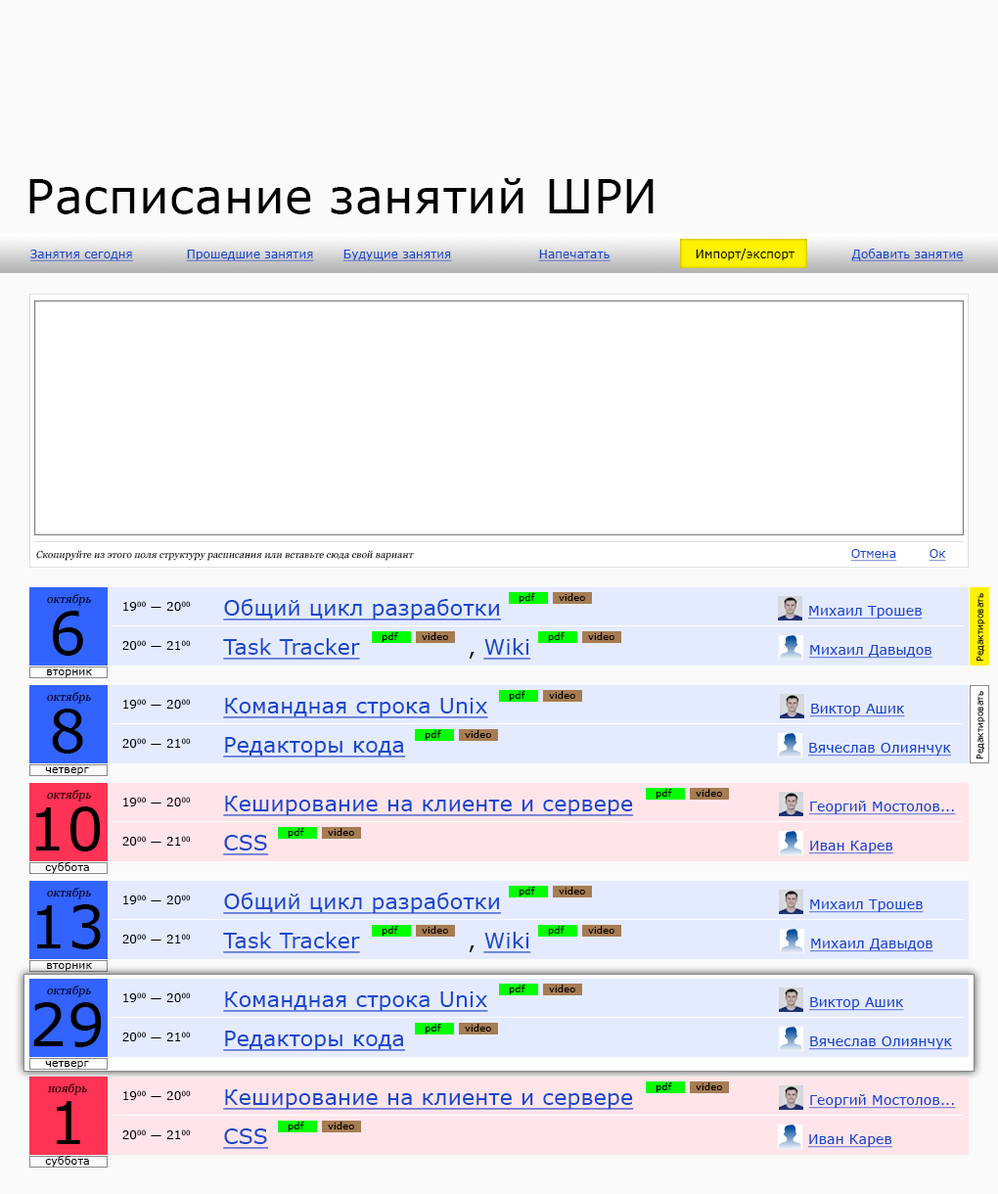
<style>
.page{position:relative;width:998px;height:1194px;background:#fafafa}
.page>*{position:absolute;margin:0}
.t1{font:47px "Verdana";letter-spacing:0.01em;color:#000000}
.t2{font:11.7px "Verdana";letter-spacing:0.01em;color:#1847cd;text-decoration:underline}
.t3{font:11.7px "Verdana";letter-spacing:0.01em;color:#000000}
.t4{font:9.8px "Georgia";letter-spacing:0.01em;color:#000000;font-style:italic}
.t5{font:9.8px "Verdana";letter-spacing:0.01em;color:#000000}
.t6{font:8.8px "Verdana";letter-spacing:0.01em;color:#000000}
.t7{font:11.7px "Georgia";letter-spacing:0.01em;color:#000000;font-style:italic}
.t8{font:21.5px "Verdana";letter-spacing:0.01em;color:#1847cd;text-decoration:underline}
.t9{font:13.7px "Verdana";letter-spacing:0.01em;color:#1847cd;text-decoration:underline}
.t10{font:58.7px "Verdana";letter-spacing:0.01em;color:#000000}
.t11{font:21.5px "Verdana";letter-spacing:0.01em;color:#000000}
.t12{font:10.8px "Verdana";letter-spacing:0.01em;color:#000000}
</style>
<div class="page">
<p class="t1" style="left:29px;top:178px;width:625px;height:36px">Расписание занятий ШРИ</p>
<p class="t2" style="left:29px;top:250px;width:104px;height:11px">Занятия сегодня</p>
<p class="t2" style="left:186px;top:250px;width:128px;height:11px">Прошедшие занятия</p>
<p class="t2" style="left:343px;top:250px;width:109px;height:11px">Будущие занятия</p>
<p class="t2" style="left:538px;top:250px;width:73px;height:11px">Напечатать</p>
<p class="t3" style="left:696px;top:249px;width:99px;height:11px">Импорт/экспорт</p>
<p class="t2" style="left:852px;top:249px;width:112px;height:12px">Добавить занятие</p>
<p class="t4" style="left:36px;top:550px;width:378px;height:11px">Скопируйте из этого поля структуру расписания или вставьте сюда свой вариант</p>
<p class="t2" style="left:851px;top:549px;width:47px;height:13px">Отмена</p>
<p class="t2" style="left:929px;top:549px;width:18px;height:13px">Ок</p>
<p class="t5" style="left:519px;top:593px;width:16px;height:10px">pdf</p>
<p class="t5" style="left:559px;top:593px;width:26px;height:8px">video</p>
<p class="t6" style="left:977px;top:593px;width:9px;height:69px;rotate:-90deg">Редактировать</p>
<p class="t7" style="left:47px;top:594px;width:44px;height:12px">октябрь</p>
<p class="t3" style="left:123px;top:601px;width:68px;height:10px">1900 — 2000</p>
<p class="t8" style="left:223px;top:599px;width:279px;height:22px">Общий цикл разработки</p>
<p class="t9" style="left:808px;top:606px;width:115px;height:14px">Михаил Трошев</p>
<p class="t10" style="left:53px;top:611px;width:30px;height:45px">6</p>
<p class="t3" style="left:122px;top:640px;width:69px;height:10px">2000 — 2100</p>
<p class="t8" style="left:223px;top:638px;width:137px;height:22px">Task Tracker</p>
<p class="t5" style="left:382px;top:632px;width:16px;height:10px">pdf</p>
<p class="t5" style="left:422px;top:632px;width:26px;height:8px">video</p>
<p class="t8" style="left:469px;top:638px;width:63px;height:22px"><span class="t11">, </span>Wiki</p>
<p class="t5" style="left:548px;top:632px;width:17px;height:10px">pdf</p>
<p class="t5" style="left:588px;top:632px;width:27px;height:8px">video</p>
<p class="t9" style="left:809px;top:645px;width:124px;height:14px">Михаил Давыдов</p>
<p class="t12" style="left:47px;top:670px;width:45px;height:7px">вторник</p>
<p class="t7" style="left:47px;top:692px;width:44px;height:12px">октябрь</p>
<p class="t3" style="left:123px;top:699px;width:68px;height:10px">1900 — 2000</p>
<p class="t8" style="left:223px;top:698px;width:265px;height:21px">Командная строка Unix</p>
<p class="t5" style="left:509px;top:691px;width:17px;height:10px">pdf</p>
<p class="t5" style="left:549px;top:691px;width:27px;height:8px">video</p>
<p class="t6" style="left:977px;top:691px;width:9px;height:69px;rotate:-90deg">Редактировать</p>
<p class="t10" style="left:52px;top:709px;width:31px;height:45px">8</p>
<p class="t9" style="left:810px;top:704px;width:95px;height:14px">Виктор Ашик</p>
<p class="t8" style="left:223px;top:737px;width:183px;height:21px">Редакторы кода</p>
<p class="t5" style="left:425px;top:730px;width:16px;height:10px">pdf</p>
<p class="t5" style="left:465px;top:730px;width:26px;height:8px">video</p>
<p class="t3" style="left:122px;top:738px;width:69px;height:10px">2000 — 2100</p>
<p class="t9" style="left:808px;top:743px;width:144px;height:14px">Вячеслав Олиянчук</p>
<p class="t12" style="left:45px;top:767px;width:44px;height:8px">четверг</p>
<p class="t7" style="left:47px;top:790px;width:44px;height:12px">октябрь</p>
<p class="t3" style="left:123px;top:797px;width:68px;height:10px">1900 — 2000</p>
<p class="t8" style="left:223px;top:796px;width:411px;height:20px">Кеширование на клиенте и сервере</p>
<p class="t5" style="left:656px;top:789px;width:17px;height:10px">pdf</p>
<p class="t5" style="left:696px;top:789px;width:26px;height:8px">video</p>
<p class="t10" style="left:36px;top:807px;width:65px;height:45px">10</p>
<p class="t9" style="left:809px;top:801px;width:147px;height:14px">Георгий Мостолов...</p>
<p class="t5" style="left:288px;top:828px;width:16px;height:10px">pdf</p>
<p class="t5" style="left:328px;top:828px;width:26px;height:8px">video</p>
<p class="t3" style="left:122px;top:836px;width:69px;height:10px">2000 — 2100</p>
<p class="t8" style="left:223px;top:835px;width:46px;height:21px">CSS</p>
<p class="t9" style="left:809px;top:841px;width:85px;height:14px">Иван Карев</p>
<p class="t12" style="left:45px;top:862px;width:44px;height:11px">суббота</p>
<p class="t7" style="left:47px;top:888px;width:44px;height:12px">октябрь</p>
<p class="t8" style="left:223px;top:893px;width:279px;height:21px">Общий цикл разработки</p>
<p class="t5" style="left:519px;top:887px;width:16px;height:10px">pdf</p>
<p class="t5" style="left:559px;top:887px;width:26px;height:8px">video</p>
<p class="t10" style="left:37px;top:905px;width:64px;height:45px">13</p>
<p class="t3" style="left:123px;top:895px;width:68px;height:10px">1900 — 2000</p>
<p class="t9" style="left:809px;top:900px;width:115px;height:13px">Михаил Трошев</p>
<p class="t5" style="left:382px;top:926px;width:16px;height:10px">pdf</p>
<p class="t5" style="left:422px;top:926px;width:26px;height:8px">video</p>
<p class="t5" style="left:548px;top:926px;width:17px;height:10px">pdf</p>
<p class="t5" style="left:588px;top:926px;width:27px;height:8px">video</p>
<p class="t3" style="left:122px;top:934px;width:69px;height:10px">2000 — 2100</p>
<p class="t8" style="left:223px;top:932px;width:137px;height:21px">Task Tracker</p>
<p class="t8" style="left:469px;top:932px;width:63px;height:21px"><span class="t11">, </span>Wiki</p>
<p class="t9" style="left:810px;top:939px;width:124px;height:13px">Михаил Давыдов</p>
<p class="t12" style="left:47px;top:963px;width:45px;height:8px">вторник</p>
<p class="t7" style="left:47px;top:986px;width:44px;height:11px">октябрь</p>
<p class="t5" style="left:509px;top:985px;width:17px;height:10px">pdf</p>
<p class="t5" style="left:549px;top:985px;width:27px;height:8px">video</p>
<p class="t3" style="left:123px;top:993px;width:68px;height:9px">1900 — 2000</p>
<p class="t8" style="left:223px;top:992px;width:265px;height:20px">Командная строка Unix</p>
<p class="t9" style="left:809px;top:997px;width:96px;height:14px">Виктор Ашик</p>
<p class="t10" style="left:33px;top:1002px;width:69px;height:45px">29</p>
<p class="t5" style="left:425px;top:1024px;width:16px;height:10px">pdf</p>
<p class="t5" style="left:465px;top:1024px;width:26px;height:8px">video</p>
<p class="t3" style="left:122px;top:1032px;width:69px;height:10px">2000 — 2100</p>
<p class="t8" style="left:223px;top:1031px;width:183px;height:20px">Редакторы кода</p>
<p class="t9" style="left:809px;top:1037px;width:144px;height:13px">Вячеслав Олиянчук</p>
<p class="t12" style="left:45px;top:1061px;width:44px;height:8px">четверг</p>
<p class="t7" style="left:47px;top:1084px;width:40px;height:11px">ноябрь</p>
<p class="t5" style="left:656px;top:1083px;width:17px;height:9px">pdf</p>
<p class="t5" style="left:696px;top:1083px;width:26px;height:7px">video</p>
<p class="t3" style="left:123px;top:1090px;width:68px;height:10px">1900 — 2000</p>
<p class="t8" style="left:223px;top:1090px;width:411px;height:20px">Кеширование на клиенте и сервере</p>
<p class="t9" style="left:809px;top:1094px;width:147px;height:15px">Георгий Мостолов...</p>
<p class="t10" style="left:57px;top:1101px;width:23px;height:43px">1</p>
<p class="t5" style="left:288px;top:1122px;width:16px;height:10px">pdf</p>
<p class="t5" style="left:328px;top:1122px;width:26px;height:8px">video</p>
<p class="t3" style="left:122px;top:1130px;width:69px;height:9px">2000 — 2100</p>
<p class="t8" style="left:223px;top:1129px;width:46px;height:20px">CSS</p>
<p class="t9" style="left:808px;top:1135px;width:85px;height:13px">Иван Карев</p>
<p class="t12" style="left:45px;top:1156px;width:44px;height:11px">суббота</p>
</div>
